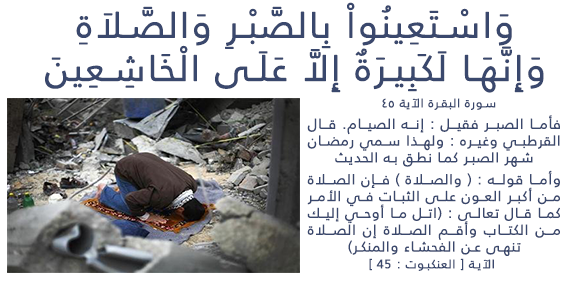
<style>
.page{position:relative;width:567px;height:283px;background:#ffffff}
.page>*{position:absolute;margin:0}
.t1{font:36px "FrutigerLTArabic-45Light";letter-spacing:0.05em;color:#3a486d;font-weight:bold}
.t2{font:12px "FrutigerLTArabic-45Light";letter-spacing:0.05em;color:#3a486d;font-weight:bold}
.t3{font:14px "FrutigerLTArabic-45Light";letter-spacing:0.05em;color:#3a486d;font-weight:bold}
</style>
<div class="page">
<p class="t1" style="left:45px;top:2px;width:499px;height:91px;text-align:center">وَاسْتَعِينُواْ بِالصَّبْرِ وَالصَّلاَةِ وَإِنَّهَا لَكَبِيرَةٌ إِلاَّ عَلَى الْخَاشِعِينَ</p>
<p class="t2" style="left:382px;top:98px;width:114px;height:12px">سورة البقرة الآية ٤٥</p>
<p class="t3" style="left:307px;top:115px;width:253px;height:52px;text-align:justify">فأما الصبر فقيل : إنه الصيام. قال القرطبي وغيره : ولهذا سمي رمضان شهر الصبر كما نطق به الحديث</p>
<p class="t3" style="left:307px;top:170px;width:253px;height:101px;text-align:justify">وأما قوله : ( والصلاة ) فإن الصلاة من أكبر العون على الثبات في الأمر كما قال تعالى : (اتل ما أوحي إليك من الكتاب وأقم الصلاة إن الصلاة تنهى عن الفحشاء والمنكر)<br> <span class="t2">الآية [ العنكبوت : 45 ]</span></p>
</div>
